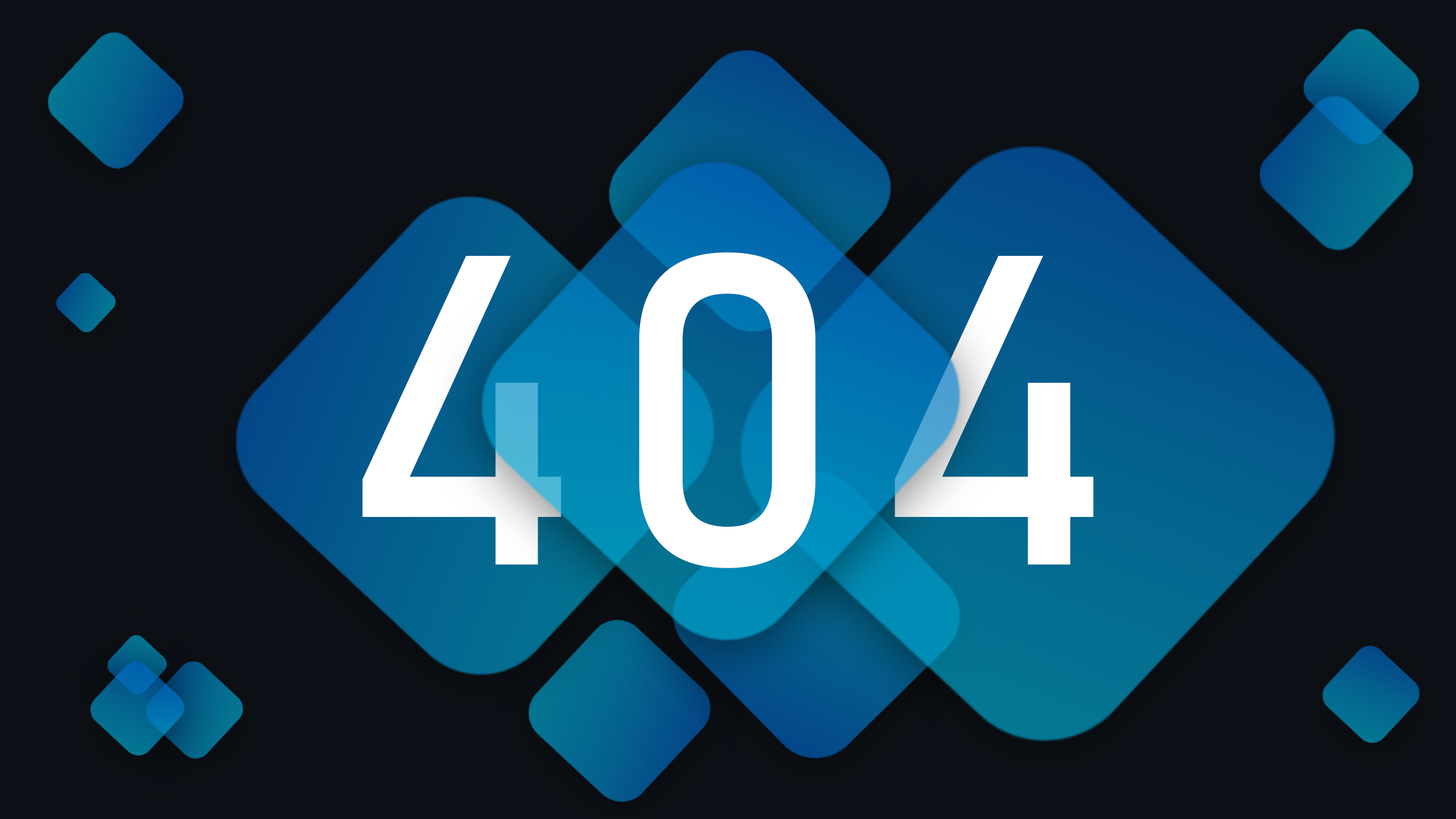
<style>
.page{position:relative;width:1456px;height:819px;background:#0d1117}
.page>*{position:absolute;margin:0}
.t1{font:434.7px "Bahnschrift";letter-spacing:0.005em;color:#ffffff}
</style>
<div class="page">
<p class="t1" style="left:362px;top:255px;width:199px;height:310px">4</p>
<p class="t1" style="left:639px;top:252px;width:177px;height:316px">0</p>
<p class="t1" style="left:895px;top:255px;width:199px;height:310px">4</p>
</div>
